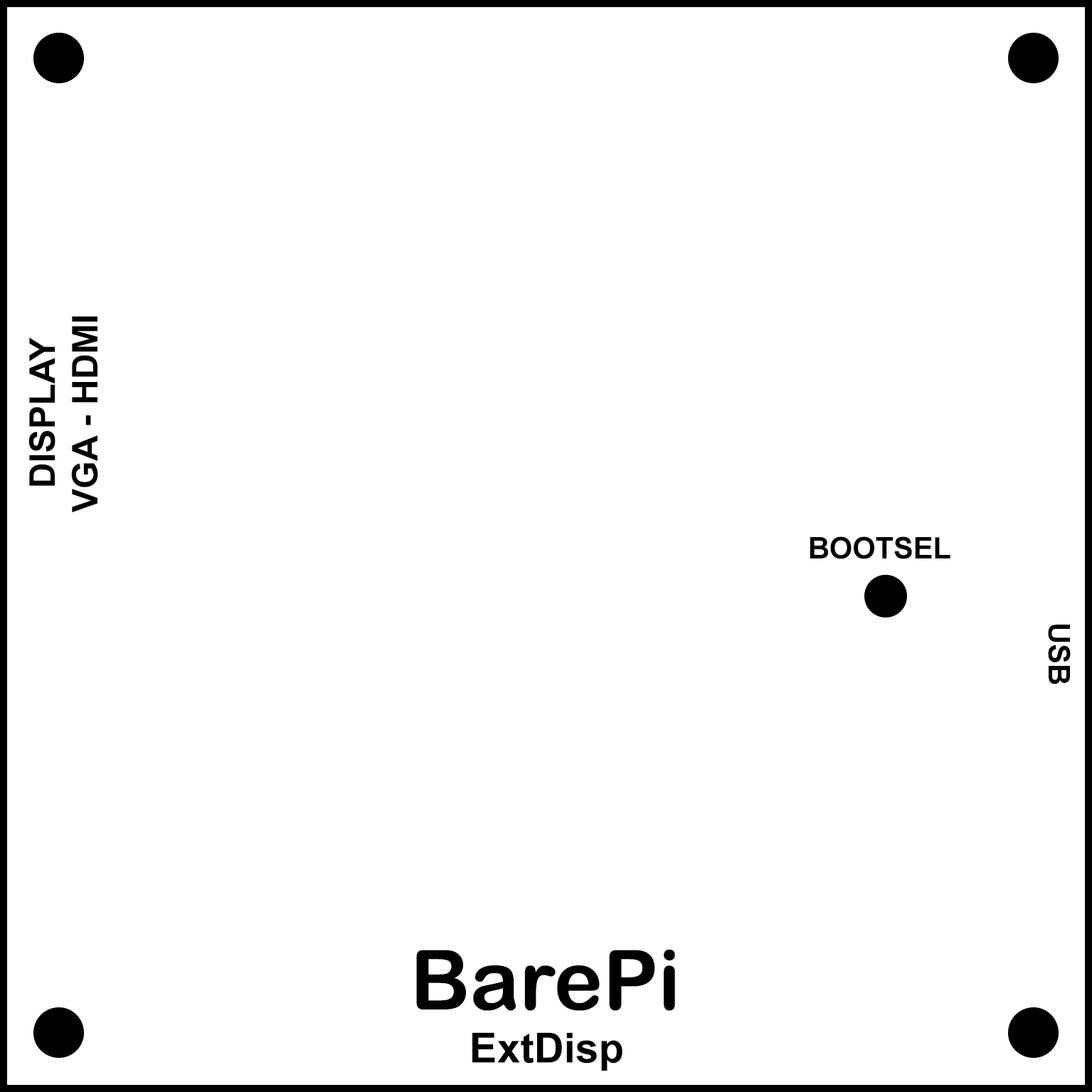
<style>
.page{position:relative;width:1092px;height:1092px;background:#ffffff}
.page>*{position:absolute;margin:0}
.t1{font:35.6px "Arial-BoldMT";color:#000000}
.t2{font:29.6px "Arial-BoldMT";color:#000000}
.t3{font:83px "ArialRoundedMTBold";color:#000000}
.t4{font:41.5px "Arial-BoldMT";color:#000000}
</style>
<div class="page">
<p class="t1" style="left:28px;top:316px;width:70px;height:197px;text-align:center;rotate:-90deg">DISPLAY<br>VGA - HDMI</p>
<p class="t2" style="left:810px;top:536px;width:140px;height:23px">BOOTSEL</p>
<p class="t2" style="left:1048px;top:625px;width:23px;height:59px;rotate:90deg">USB</p>
<p class="t3" style="left:416px;top:949px;width:259px;height:62px">BarePi</p>
<p class="t4" style="left:472px;top:1032px;width:150px;height:39px">ExtDisp</p>
</div>
